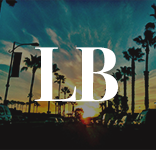
<style>
.page{position:relative;width:156px;height:150px}
.page>*{position:absolute;margin:0}
.t1{font:77.2px "BodoniSvtyTwoOSITCTT-Bold";letter-spacing:-0.025em;color:#ffffff}
</style>
<div class="page">
<p class="t1" style="left:34px;top:47px;width:84px;height:55px">LB</p>
</div>
